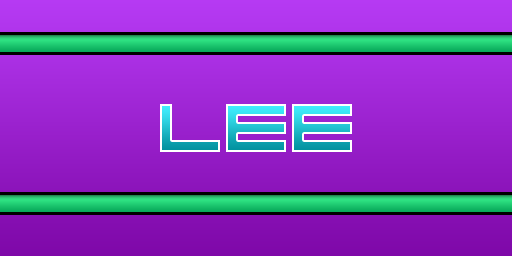
<style>
.page{position:relative;width:512px;height:256px}
.page>*{position:absolute;margin:0}
.t1{font:48px "DaMadRave"}
</style>
<div class="page">
<p class="t1" style="left:160px;top:104px;width:192px;height:48px">Lee</p>
</div>
